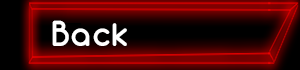
<style>
.page{position:relative;width:300px;height:70px}
.page>*{position:absolute;margin:0}
.t1{font:36px "Neon80s";color:#ffffff}
</style>
<div class="page">
<p class="t1" style="left:52px;top:20px;width:75px;height:26px">Back</p>
</div>
